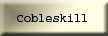
<style>
.page{position:relative;width:108px;height:36px}
.page>*{position:absolute;margin:0}
.t1{font:12px "Courier";color:#000000}
</style>
<div class="page">
<p class="t1" style="left:17px;top:14px;width:70px;height:8px">Cobleskill</p>
</div>
